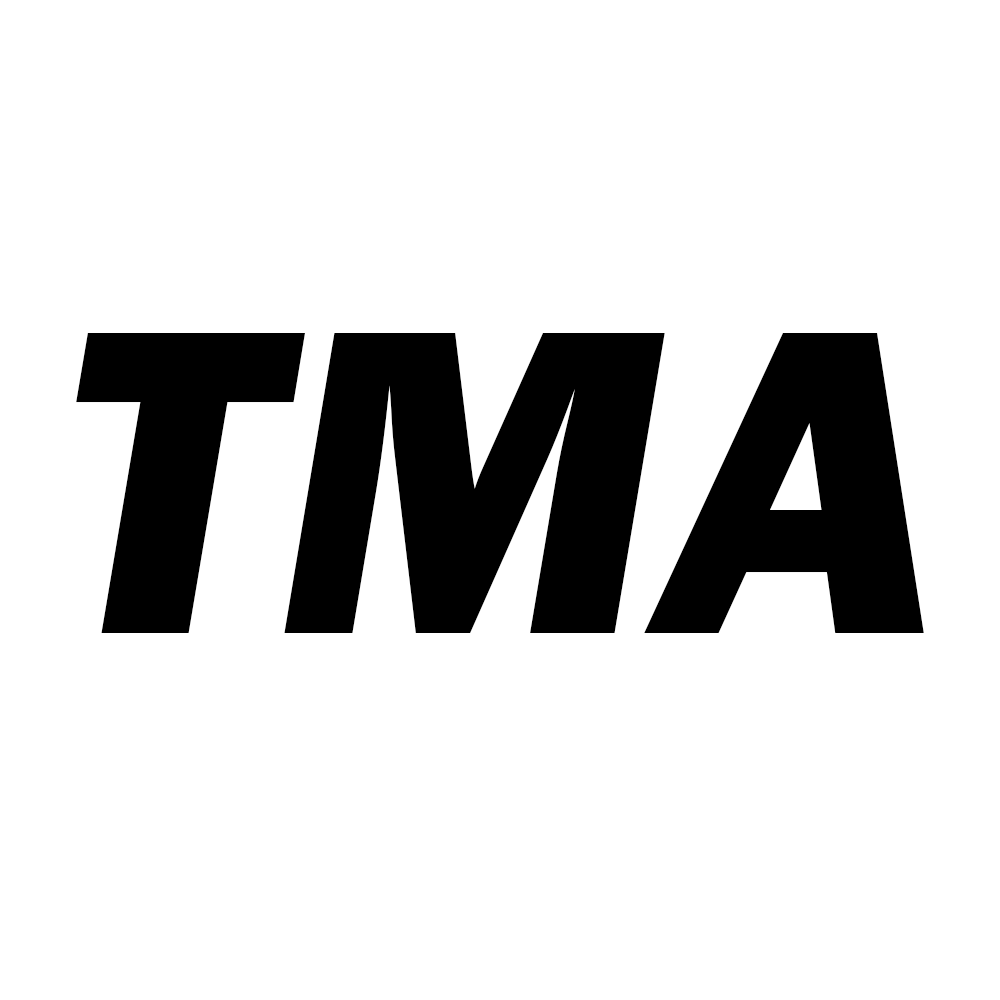
<style>
.page{position:relative;width:1000px;height:1000px;background:#ffffff}
.page>*{position:absolute;margin:0}
.t1{font:450px "FranklinGothic-HeavyItalic";color:#000000}
</style>
<div class="page">
<p class="t1" style="left:76px;top:333px;width:848px;height:300px">TMA</p>
</div>
